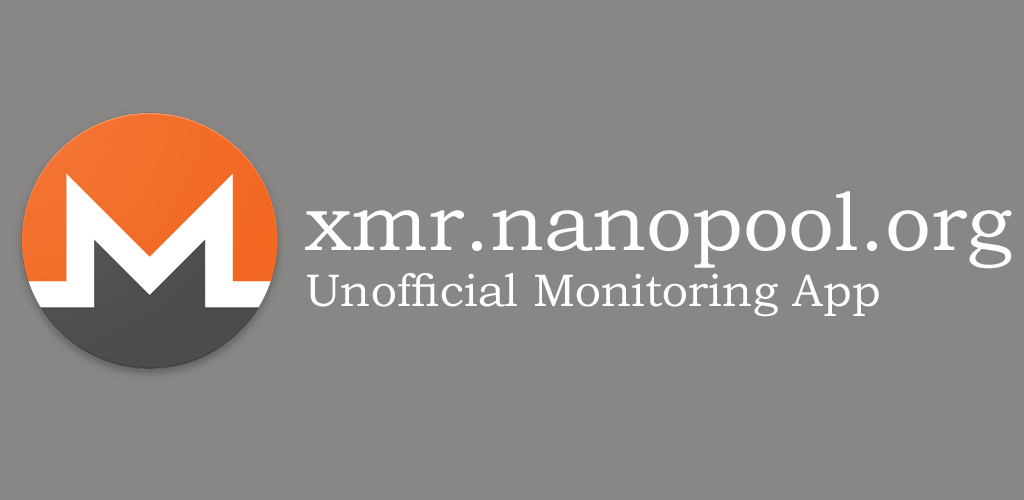
<style>
.page{position:relative;width:1024px;height:500px;background:#898686}
.page>*{position:absolute;margin:0}
.t1{font:46px "BookmanOldStyle";color:#ffffff}
.t2{font:82px "BookmanOldStyle";color:#ffffff}
</style>
<div class="page">
<p class="t1" style="left:305px;top:191px;width:707px;height:126px"><span class="t2">xmr.nanopool.org<br></span>Unofficial Monitoring App</p>
</div>
